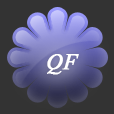
<style>
.page{position:relative;width:114px;height:114px;background:#333333}
.page>*{position:absolute;margin:0}
.t1{font:28px "Vijaya";color:#ffffff;font-weight:bold}
</style>
<div class="page">
<p class="t1" style="left:47px;top:54px;width:32px;height:21px">QF</p>
</div>
